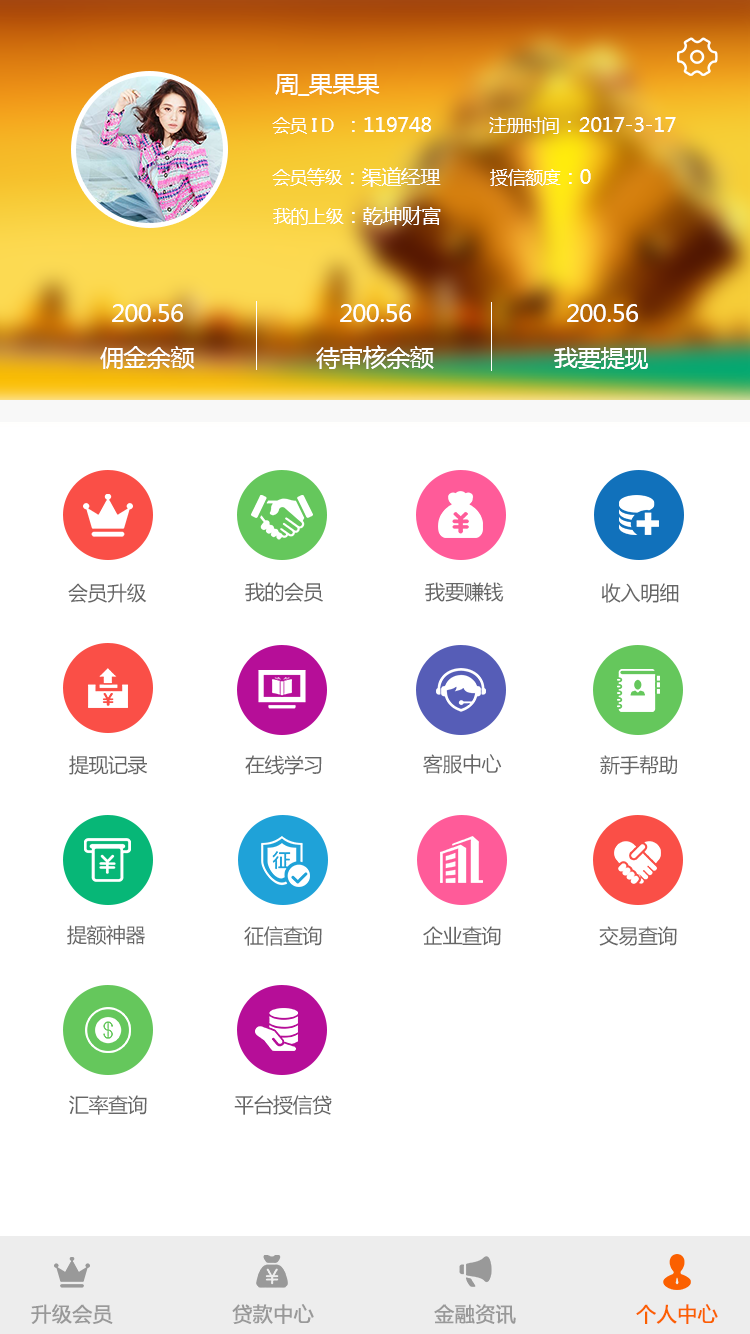
<style>
.page{position:relative;width:750px;height:1334px;background:#ffffff}
.page>*{position:absolute;margin:0}
.t1{font:24px "MicrosoftYaHei";letter-spacing:-0.025em;color:#ffffff}
.t2{font:20px "MicrosoftYaHei";letter-spacing:-0.025em;color:#ffffff}
.t3{font:18px "MicrosoftYaHei";letter-spacing:-0.025em;color:#ffffff}
.t4{font:20px "MicrosoftYaHei";letter-spacing:-0.025em;color:#666666}
.t5{font:20px "MicrosoftYaHei";color:#999999;font-weight:bold}
.t6{font:20px "MicrosoftYaHei";color:#fb6000;font-weight:bold}
</style>
<div class="page">
<p class="t1" style="left:275px;top:74px;width:105px;height:22px">周_果果果</p>
<p class="t2" style="left:272px;top:117px;width:159px;height:17px"><span class="t3">会员 I D  </span>：119748</p>
<p class="t2" style="left:489px;top:117px;width:187px;height:17px"><span class="t3">注册时间</span>：2017-3-17</p>
<p class="t2" style="left:272px;top:167px;width:169px;height:20px"><span class="t3">会员等级</span>：渠道经理</p>
<p class="t3" style="left:490px;top:169px;width:101px;height:17px">授信额度<span class="t2">：0</span></p>
<p class="t2" style="left:273px;top:206px;width:168px;height:20px"><span class="t3">我的上级</span>：乾坤财富</p>
<p class="t1" style="left:112px;top:304px;width:71px;height:18px">200.56</p>
<p class="t1" style="left:340px;top:304px;width:71px;height:18px">200.56</p>
<p class="t1" style="left:567px;top:304px;width:71px;height:18px">200.56</p>
<p class="t1" style="left:100px;top:346px;width:95px;height:23px">佣金余额</p>
<p class="t1" style="left:316px;top:345px;width:118px;height:24px">待审核余额</p>
<p class="t1" style="left:554px;top:347px;width:94px;height:23px">我要提现</p>
<p class="t4" style="left:245px;top:582px;width:78px;height:20px">我的会员</p>
<p class="t4" style="left:425px;top:582px;width:79px;height:20px">我要赚钱</p>
<p class="t4" style="left:68px;top:583px;width:79px;height:20px">会员升级</p>
<p class="t4" style="left:601px;top:583px;width:78px;height:20px">收入明细</p>
<p class="t4" style="left:69px;top:755px;width:79px;height:20px">提现记录</p>
<p class="t4" style="left:245px;top:755px;width:77px;height:20px">在线学习</p>
<p class="t4" style="left:423px;top:754px;width:79px;height:20px">客服中心</p>
<p class="t4" style="left:600px;top:755px;width:78px;height:20px">新手帮助</p>
<p class="t4" style="left:67px;top:925px;width:78px;height:20px">提额神器</p>
<p class="t4" style="left:244px;top:926px;width:78px;height:20px">征信查询</p>
<p class="t4" style="left:423px;top:926px;width:78px;height:20px">企业查询</p>
<p class="t4" style="left:599px;top:926px;width:78px;height:20px">交易查询</p>
<p class="t4" style="left:69px;top:1095px;width:78px;height:20px">汇率查询</p>
<p class="t4" style="left:234px;top:1095px;width:98px;height:20px">平台授信贷</p>
<p class="t5" style="left:31px;top:1304px;width:82px;height:20px">升级会员</p>
<p class="t5" style="left:232px;top:1304px;width:82px;height:20px">贷款中心</p>
<p class="t5" style="left:434px;top:1304px;width:82px;height:20px">金融资讯</p>
<p class="t6" style="left:636px;top:1304px;width:82px;height:20px">个人中心</p>
</div>
